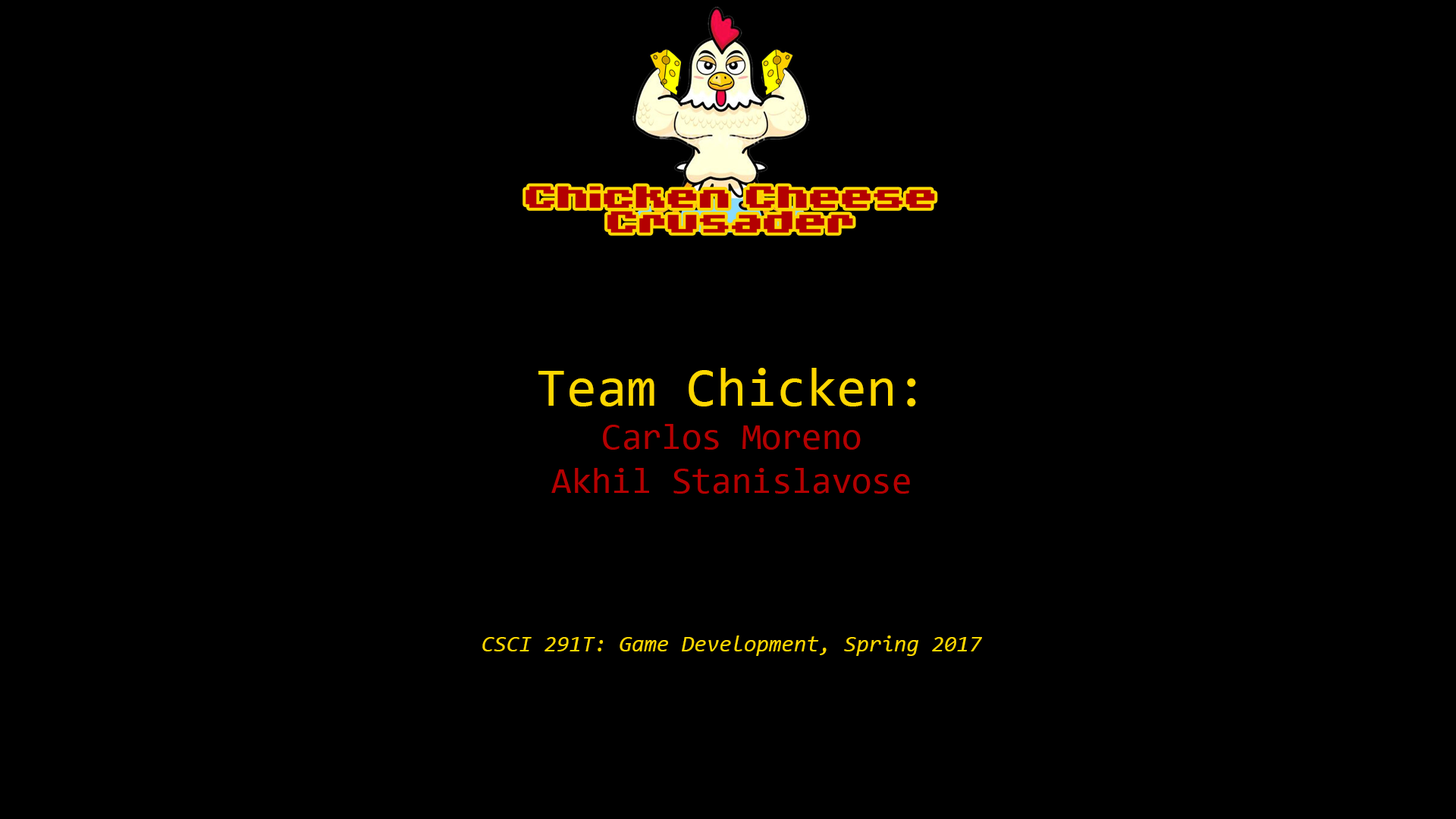
<style>
.page{position:relative;width:1456px;height:819px;background:#000000}
.page>*{position:absolute;margin:0}
.t1{font:22.7px "Consolas-Italic";color:#ffd700}
.t2{font:54.6px "Consolas";color:#ffd700}
.t3{font:36.4px "Consolas";color:#b40001}
</style>
<div class="page">
<p class="t1" style="left:482px;top:368px;width:500px;height:288px;text-align:center"><span class="t2">Team Chicken:<br></span><span class="t3">Carlos Moreno<br>Akhil Stanislavose<br><br><br><br><br></span>CSCI 291T: Game Development, Spring 2017</p>
</div>
